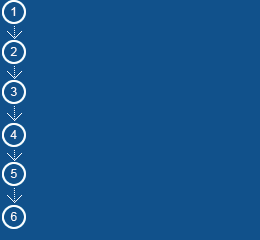
<style>
.page{position:relative;width:260px;height:240px;background:#11518b}
.page>*{position:absolute;margin:0}
.t1{font:12px "ArialMT";color:#fbf8f8}
</style>
<div class="page">
<p class="t1" style="left:11px;top:7px;width:5px;height:9px">1</p>
<p class="t1" style="left:10px;top:47px;width:7px;height:9px">2</p>
<p class="t1" style="left:10px;top:87px;width:7px;height:9px">3</p>
<p class="t1" style="left:10px;top:130px;width:7px;height:9px">4</p>
<p class="t1" style="left:10px;top:169px;width:7px;height:9px">5</p>
<p class="t1" style="left:10px;top:212px;width:7px;height:9px">6</p>
</div>
